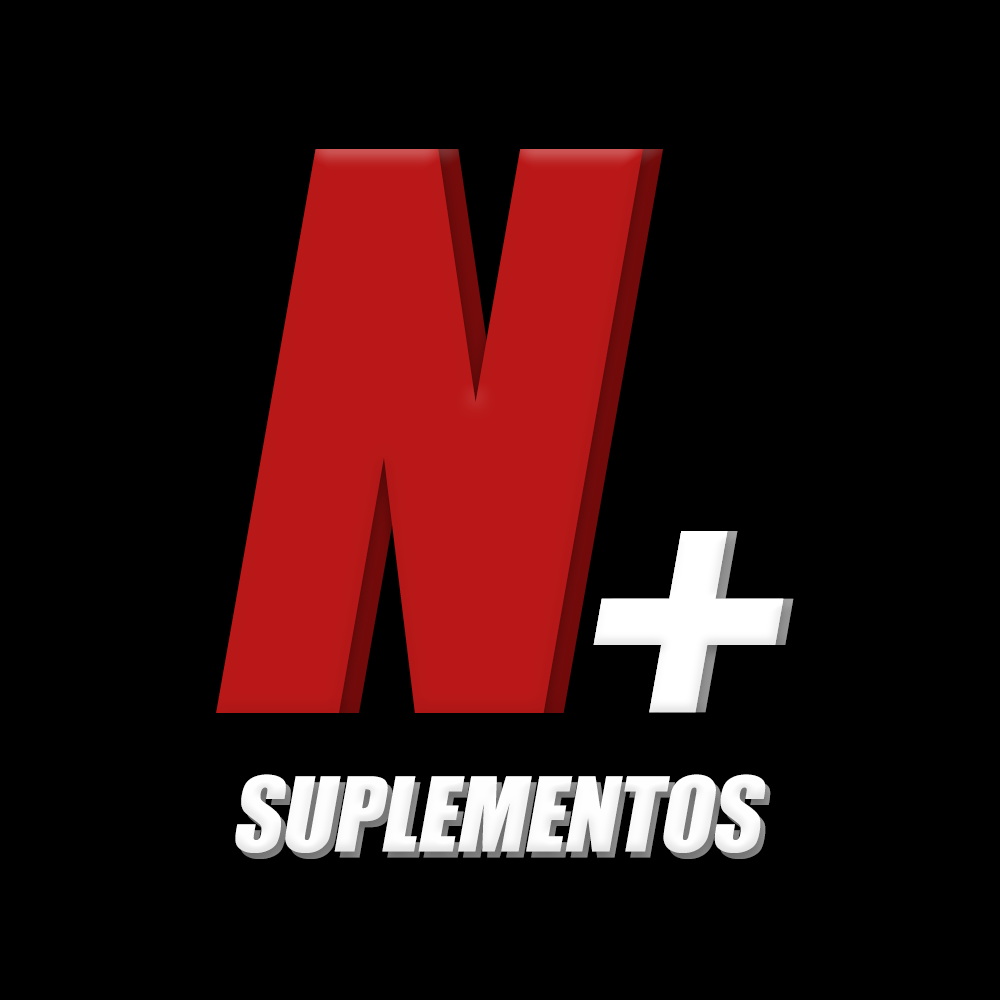
<style>
.page{position:relative;width:1000px;height:1000px;background:#000000}
.page>*{position:absolute;margin:0}
.t1{font:712.9px "Impact";color:#ba1818;font-style:italic}
.t2{font:385.3px "Impact";color:#ffffff;font-style:italic}
.t3{font:95px "Impact";color:#fefefe;font-style:italic}
</style>
<div class="page">
<p class="t1" style="left:216px;top:149px;width:427px;height:564px">N</p>
<p class="t1" style="left:236px;top:149px;width:427px;height:564px;opacity:0.5">N</p>
<p class="t2" style="left:593px;top:531px;width:191px;height:182px">+</p>
<p class="t2" style="left:593px;top:531px;width:191px;height:182px">+</p>
<p class="t2" style="left:603px;top:531px;width:191px;height:182px;opacity:0.5">+</p>
<p class="t3" style="left:235px;top:774px;width:531px;height:79px">SUPLEMENTOS</p>
<p class="t3" style="left:240px;top:780px;width:531px;height:79px;opacity:0.5">SUPLEMENTOS</p>
</div>
